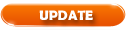
<style>
.page{position:relative;width:126px;height:30px;background:#ffffff}
.page>*{position:absolute;margin:0}
.t1{font:14px "BerlinSansFBDemi-Bold";color:#ffffff;text-transform:uppercase}
</style>
<div class="page">
<p class="t1" style="left:39px;top:10px;width:54px;height:10px">update</p>
</div>
